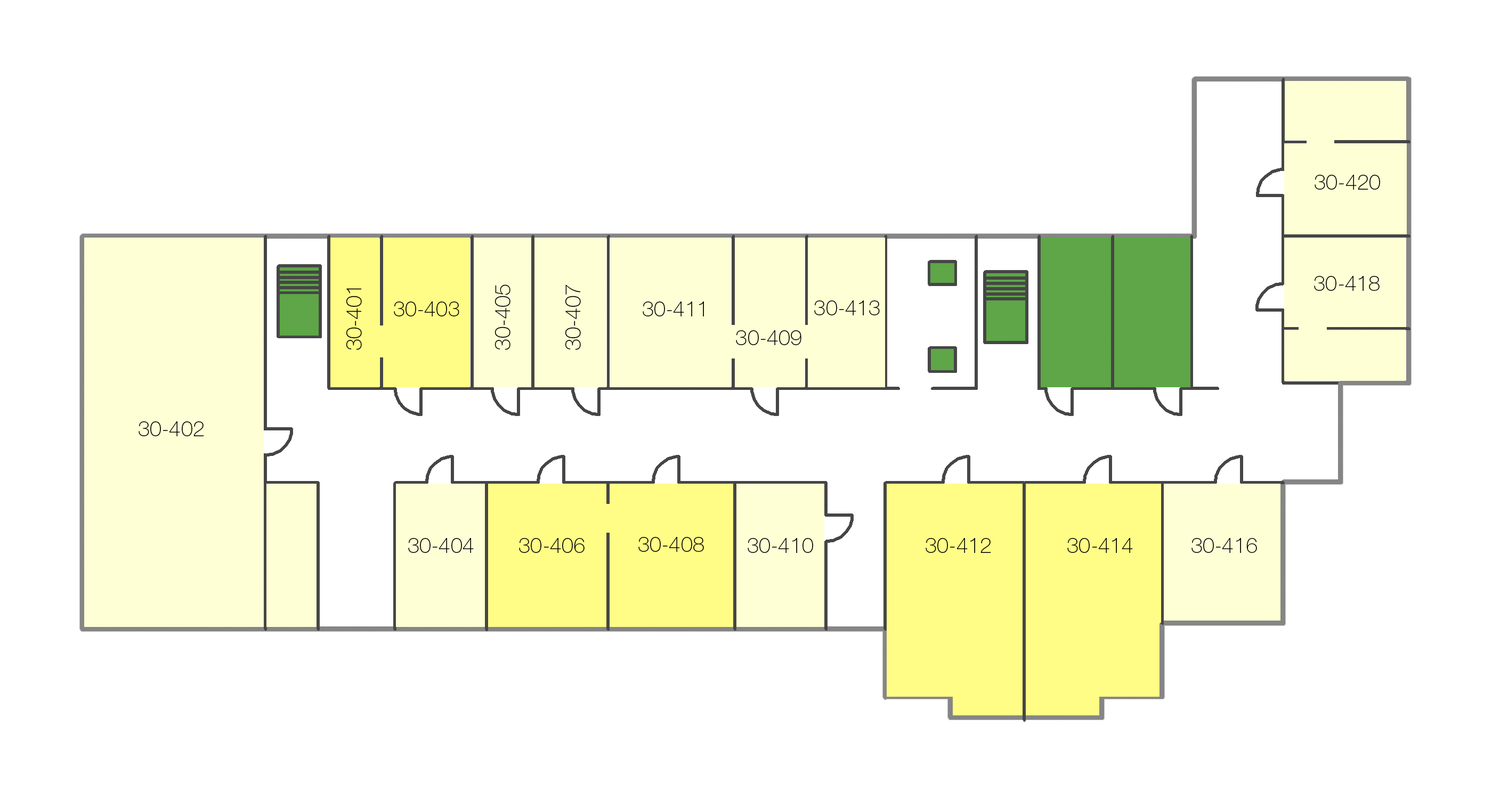
<style>
.page{position:relative;width:1492px;height:799px;background:#ffffff}
.page>*{position:absolute;margin:0}
.t1{font:21.3px "HelveticaNeueCyr-Thin";color:#000000;font-variant:small-caps}
</style>
<div class="page">
<p class="t1" style="left:1315px;top:175px;width:65px;height:15px">30-420</p>
<p class="t1" style="left:1314px;top:276px;width:66px;height:15px">30-418</p>
<p class="t1" style="left:346px;top:288px;width:16px;height:62px;rotate:-90deg">30-401</p>
<p class="t1" style="left:494px;top:285px;width:16px;height:65px;rotate:-90deg">30-405</p>
<p class="t1" style="left:565px;top:285px;width:16px;height:65px;rotate:-90deg">30-407</p>
<p class="t1" style="left:394px;top:302px;width:65px;height:15px">30-403</p>
<p class="t1" style="left:643px;top:302px;width:61px;height:15px">30-411</p>
<p class="t1" style="left:814px;top:301px;width:66px;height:14px">30-413</p>
<p class="t1" style="left:736px;top:330px;width:65px;height:15px">30-409</p>
<p class="t1" style="left:139px;top:421px;width:65px;height:15px">30-402</p>
<p class="t1" style="left:408px;top:538px;width:66px;height:15px">30-404</p>
<p class="t1" style="left:519px;top:538px;width:66px;height:15px">30-406</p>
<p class="t1" style="left:638px;top:537px;width:66px;height:15px">30-408</p>
<p class="t1" style="left:748px;top:538px;width:65px;height:15px">30-410</p>
<p class="t1" style="left:926px;top:538px;width:65px;height:15px">30-412</p>
<p class="t1" style="left:1067px;top:538px;width:66px;height:15px">30-414</p>
<p class="t1" style="left:1191px;top:538px;width:66px;height:15px">30-416</p>
</div>
